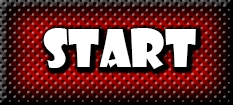
<style>
.page{position:relative;width:233px;height:105px}
.page>*{position:absolute;margin:0}
.t1{font:50px "ShowcardGothic-Reg";color:#ffffff}
.t2{font:50px "MyriadPro-Regular";color:#ffffff}
</style>
<div class="page">
<p class="t1" style="left:43px;top:28px;width:153px;height:41px"><span class="t2"> </span>START</p>
</div>
